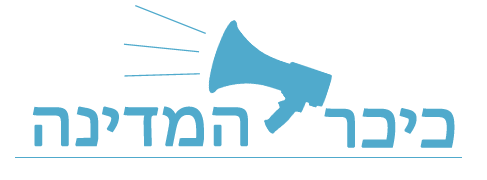
<style>
.page{position:relative;width:487px;height:180px;background:#ffffff}
.page>*{position:absolute;margin:0}
.t1{font:67.7px "MyriadHebrew-Regular";color:#50aacc;font-weight:bold;scale:1.06 1}
</style>
<div class="page">
<p class="t1" style="left:32px;top:106px;width:216px;height:41px">המדינה</p>
<p class="t1" style="left:324px;top:108px;width:131px;height:40px">כיכר</p>
</div>
